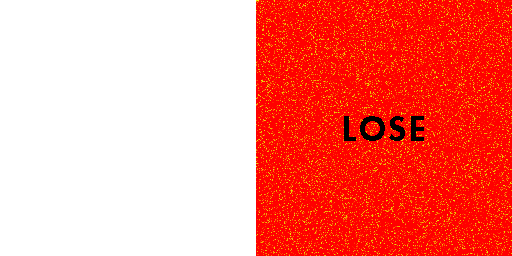
<style>
.page{position:relative;width:512px;height:256px;background:#ffffff}
.page>*{position:absolute;margin:0}
.t1{font:36px "FuturaPT-Heavy";letter-spacing:0.05em;color:#000000}
</style>
<div class="page">
<p class="t1" style="left:344px;top:116px;width:80px;height:25px">LOSE</p>
</div>
